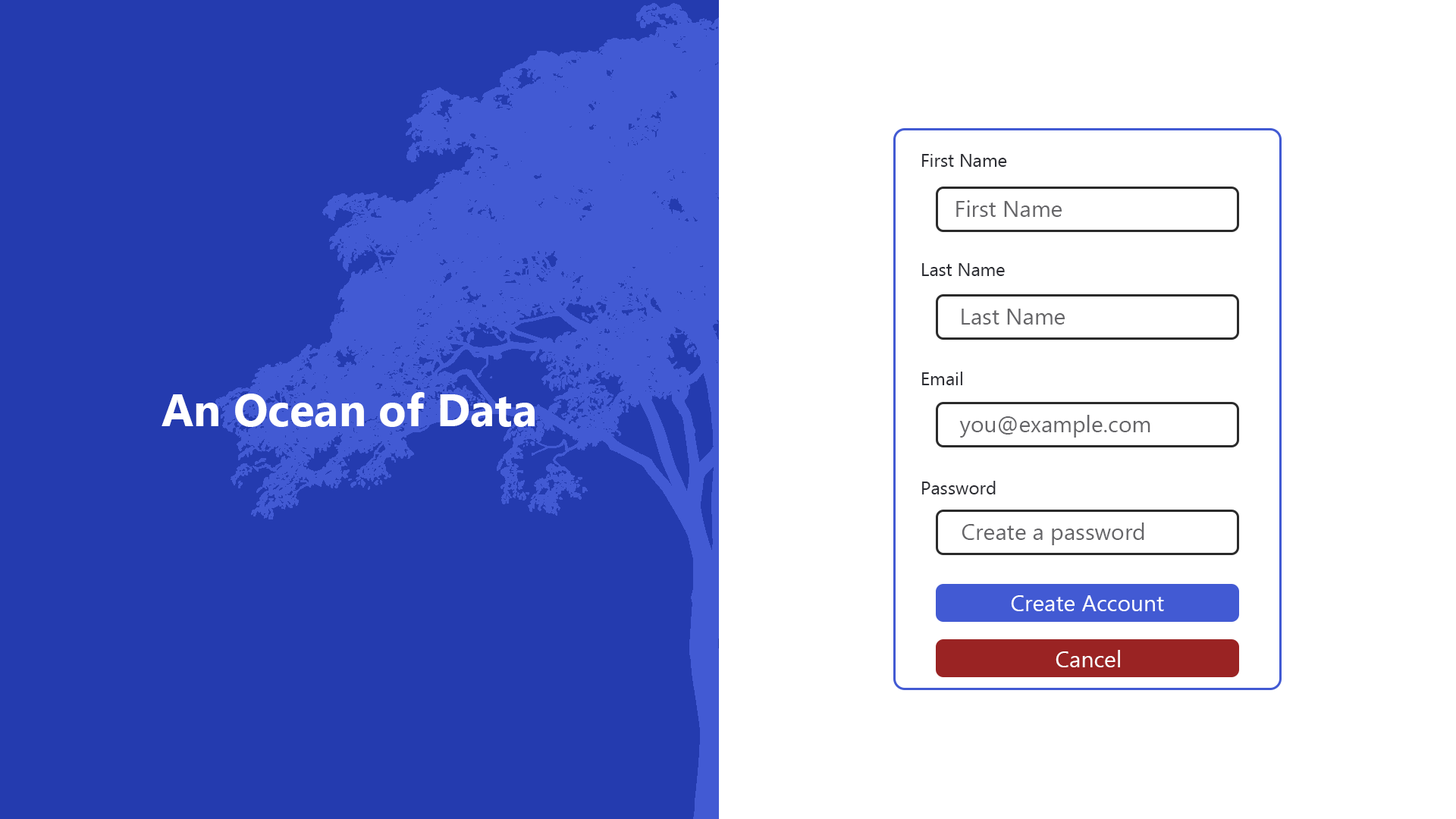
<style>
.page{position:relative;width:1456px;height:819px;background:#ffffff}
.page>*{position:absolute;margin:0}
.t1{font:18.2px "MyanmarText";color:#2c2d33}
.t2{font:22.7px "MyanmarText";color:#2c2d33}
.t3{font:22.7px "MyanmarText";color:#656568}
.t4{font:4.5px "MyanmarText";color:#656568}
.t5{font:45.5px "MyanmarText-Bold";color:#ffffff}
.t6{font:22.7px "MyanmarText";color:#ffffff}
</style>
<div class="page">
<p class="t1" style="left:922px;top:154px;width:85px;height:340px"><span class="t2"> <br></span> First Name<br><br><br> <br><br> Last Name<br><br><br><br><br> Email<br><br><br><br><br> Password</p>
<p class="t3" style="left:956px;top:200px;width:106px;height:17px"><span class="t4"><br></span>   First Name</p>
<p class="t3" style="left:962px;top:309px;width:103px;height:16px"><span class="t4"><br></span>   Last Name</p>
<p class="t5" style="left:162px;top:392px;width:373px;height:35px">An Ocean of Data</p>
<p class="t3" style="left:959px;top:415px;width:191px;height:23px"><span class="t4"><br></span>   you@example.com</p>
<p class="t3" style="left:962px;top:522px;width:182px;height:23px"><span class="t4"><br></span>   Create a password</p>
<p class="t6" style="left:1011px;top:595px;width:153px;height:16px">Create Account</p>
<p class="t6" style="left:1056px;top:650px;width:64px;height:17px">Cancel</p>
</div>
